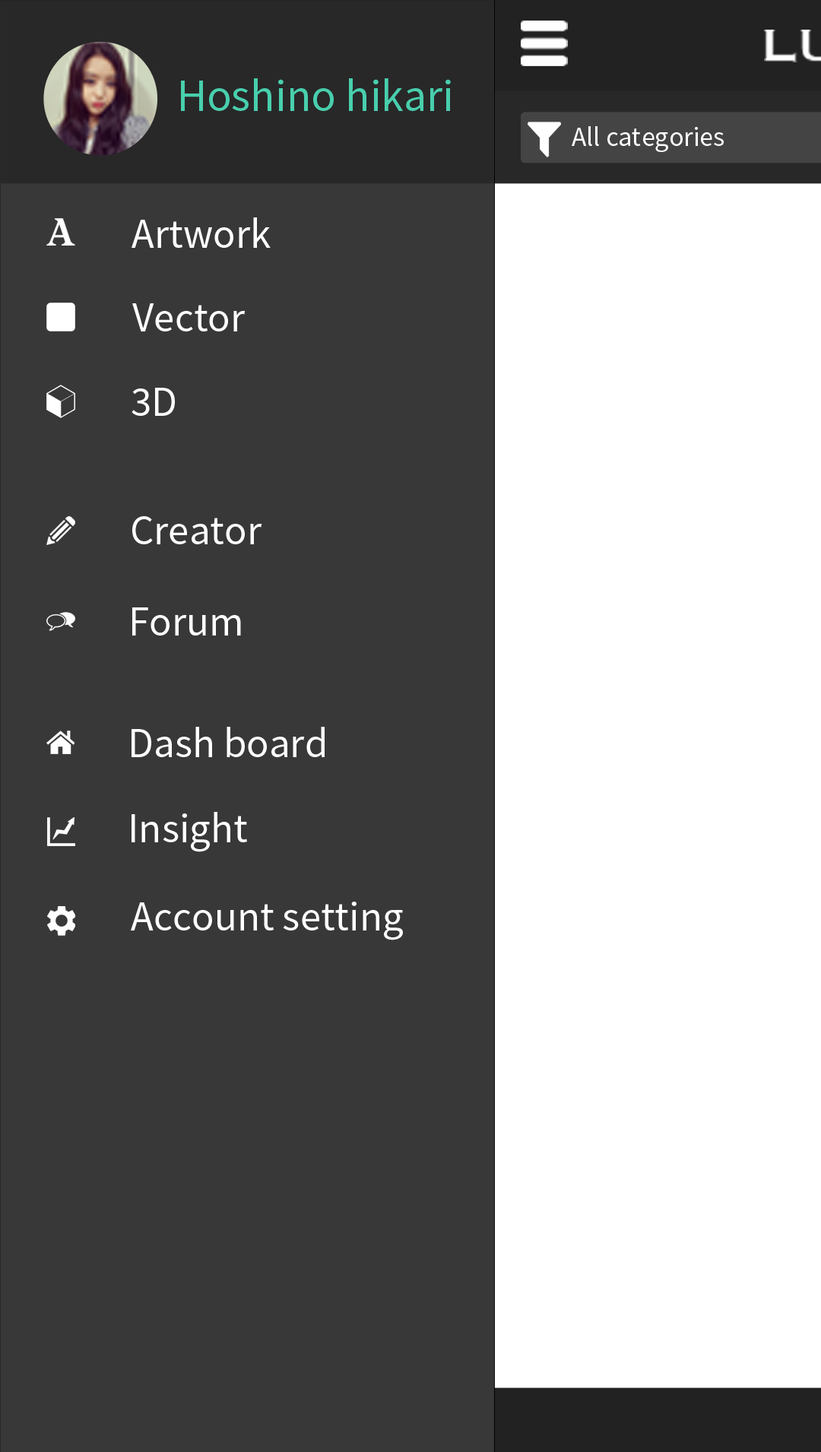
<style>
.page{position:relative;width:821px;height:1452px;background:#383838}
.page>*{position:absolute;margin:0}
.t1{font:45.6px "SourceSansPro-Regular";color:#48cfad}
.t2{font:27.4px "SourceSansPro-Regular";color:#ffffff}
.t3{font:41.8px "SourceSansPro-Regular";color:#ffffff}
</style>
<div class="page">
<p class="t1" style="left:181px;top:78px;width:270px;height:33px">Hoshino hikari</p>
<p class="t2" style="left:572px;top:126px;width:152px;height:26px">All categories</p>
<p class="t3" style="left:132px;top:217px;width:139px;height:31px">Artwork</p>
<p class="t3" style="left:132px;top:303px;width:114px;height:28px">Vector</p>
<p class="t3" style="left:132px;top:388px;width:43px;height:28px">3D</p>
<p class="t3" style="left:132px;top:516px;width:130px;height:28px">Creator</p>
<p class="t3" style="left:132px;top:607px;width:109px;height:29px">Forum</p>
<p class="t3" style="left:132px;top:727px;width:193px;height:30px">Dash board</p>
<p class="t3" style="left:132px;top:812px;width:115px;height:40px">Insight</p>
<p class="t3" style="left:131px;top:902px;width:272px;height:38px">Account setting</p>
</div>
